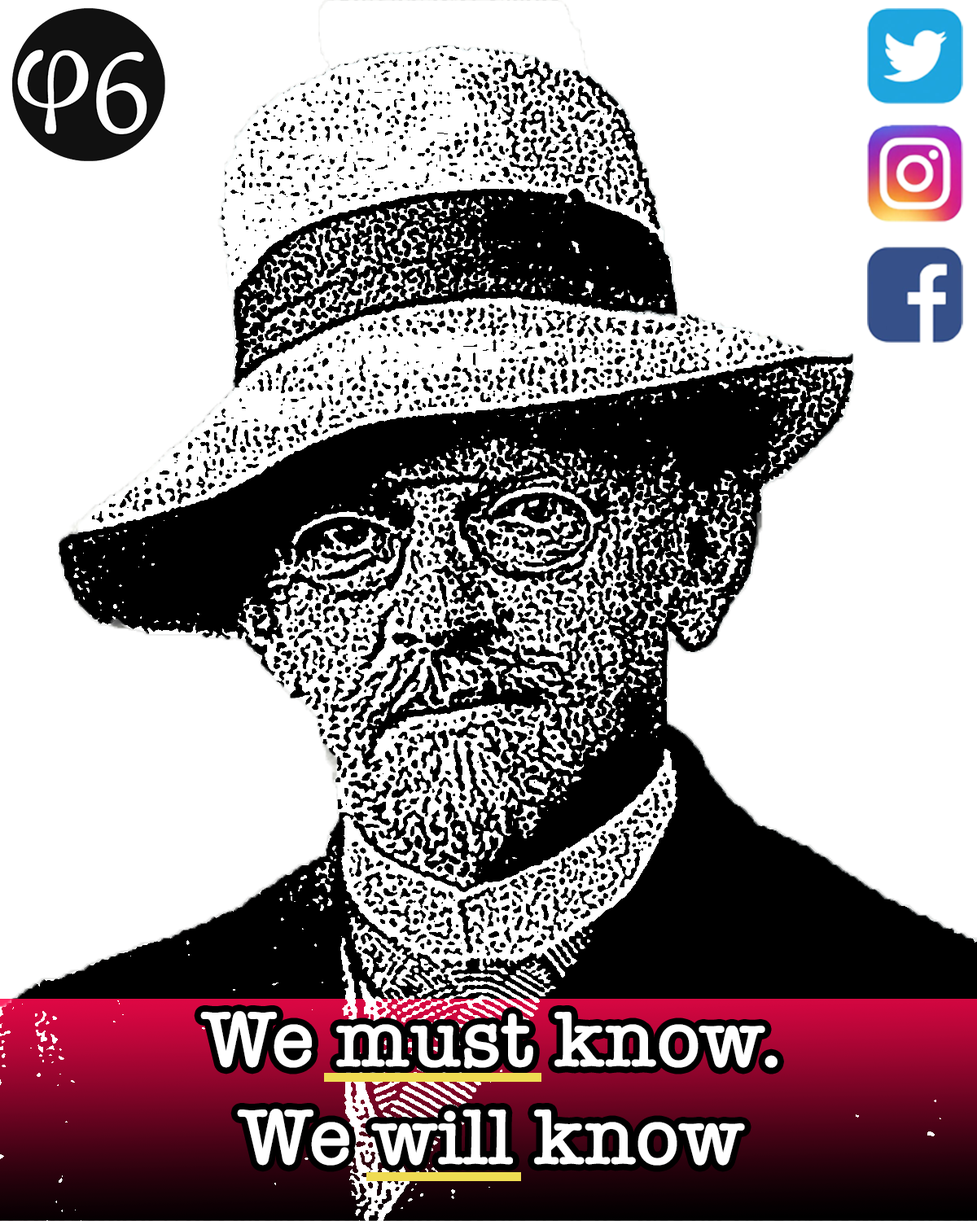
<style>
.page{position:relative;width:977px;height:1221px;background:#ffffff}
.page>*{position:absolute;margin:0}
.t1{font:81.4px "AmericanTypewriter-Semibold";color:#ffffff}
</style>
<div class="page">
<p class="t1" style="left:200px;top:1011px;width:577px;height:155px;text-align:center">We must know.<br>We will know</p>
</div>
